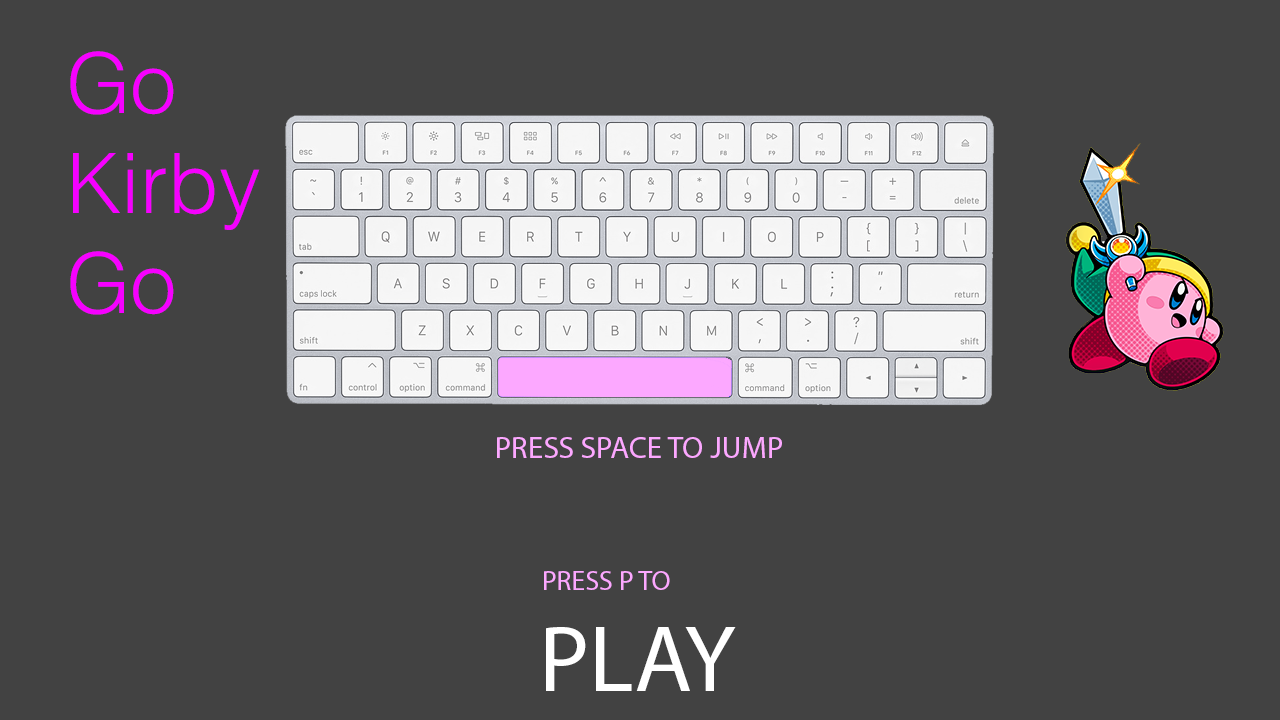
<style>
.page{position:relative;width:1280px;height:720px;background:#424242}
.page>*{position:absolute;margin:0}
.t1{font:83.4px "Helvetica-Light";color:#f600ff}
.t2{font:31.2px "MyriadPro-Regular";color:#fca8ff}
.t3{font:27.9px "MyriadPro-Regular";color:#fca8ff}
.t4{font:94.5px "MyriadPro-Regular";color:#ffffff}
</style>
<div class="page">
<p class="t1" style="left:70px;top:51px;width:190px;height:264px">Go <br>Kirby <br>Go</p>
<p class="t2" style="left:497px;top:437px;width:285px;height:21px">PRESS SPACE TO JUMP</p>
<p class="t3" style="left:544px;top:571px;width:126px;height:19px">PRESS P TO</p>
<p class="t4" style="left:546px;top:627px;width:190px;height:64px">PLAY</p>
</div>
